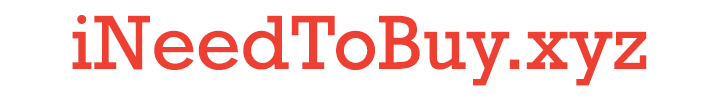
<style>
.page{position:relative;width:720px;height:100px;background:#ffffff}
.page>*{position:absolute;margin:0}
.t1{font:72px "Rockwell-Regular";color:#ed3f32}
</style>
<div class="page">
<p class="t1" style="left:72px;top:15px;width:575px;height:71px">iNeedToBuy.xyz</p>
</div>
